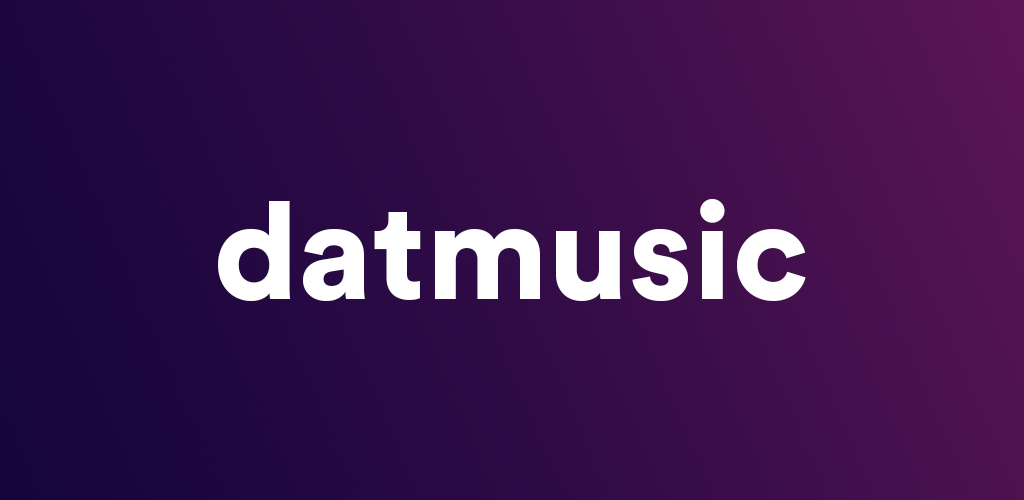
<style>
.page{position:relative;width:1024px;height:500px}
.page>*{position:absolute;margin:0}
.t1{font:136px "CircularSpUIv3-Black";color:#ffffff}
</style>
<div class="page">
<p class="t1" style="left:218px;top:199px;width:588px;height:103px">datmusic</p>
</div>
